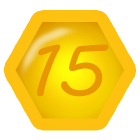
<style>
.page{position:relative;width:140px;height:140px;background:#ffffff}
.page>*{position:absolute;margin:0}
.t1{font:72px "MVBoli";color:#e99605}
</style>
<div class="page">
<p class="t1" style="left:37px;top:44px;width:72px;height:53px">15</p>
</div>
